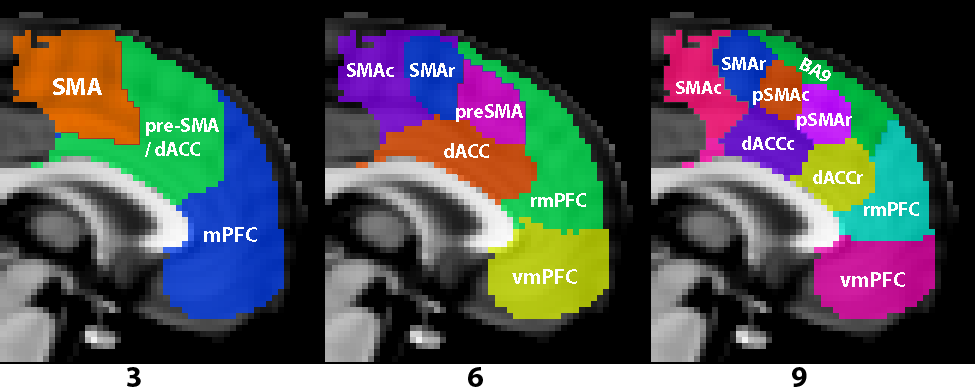
<style>
.page{position:relative;width:975px;height:387px;background:#000000}
.page>*{position:absolute;margin:0}
.t1{font:20px "MyriadPro-Bold";letter-spacing:-0.01em;color:#ffffff}
.t2{font:19px "MyriadPro-Bold";letter-spacing:-0.01em;color:#ffffff}
.t3{font:25px "MyriadPro-Bold";letter-spacing:-0.01em;color:#ffffff}
.t4{font:22px "MyriadPro-Bold";letter-spacing:-0.01em;color:#ffffff}
</style>
<div class="page">
<p class="t1" style="left:347px;top:63px;width:108px;height:14px">SMAc    SMAr</p>
<p class="t2" style="left:722px;top:57px;width:44px;height:13px">SMAr</p>
<p class="t2" style="left:799px;top:57px;width:32px;height:24px;rotate:28deg">BA9</p>
<p class="t3" style="left:53px;top:78px;width:49px;height:17px">SMA</p>
<p class="t2" style="left:676px;top:81px;width:45px;height:13px">SMAc</p>
<p class="t2" style="left:753px;top:88px;width:56px;height:17px">pSMAc</p>
<p class="t1" style="left:456px;top:104px;width:67px;height:18px">preSMA</p>
<p class="t2" style="left:797px;top:113px;width:55px;height:17px">pSMAr</p>
<p class="t1" style="left:145px;top:118px;width:74px;height:39px">pre-SMA<br>/ dACC</p>
<p class="t2" style="left:742px;top:136px;width:52px;height:14px">dACCc</p>
<p class="t1" style="left:444px;top:143px;width:45px;height:15px">dACC</p>
<p class="t2" style="left:813px;top:170px;width:50px;height:14px">dACCr</p>
<p class="t1" style="left:531px;top:193px;width:55px;height:14px">rmPFC</p>
<p class="t1" style="left:864px;top:202px;width:55px;height:14px">rmPFC</p>
<p class="t4" style="left:204px;top:227px;width:53px;height:15px">mPFC</p>
<p class="t4" style="left:512px;top:269px;width:65px;height:15px">vmPFC</p>
<p class="t4" style="left:840px;top:272px;width:65px;height:15px">vmPFC</p>
</div>
